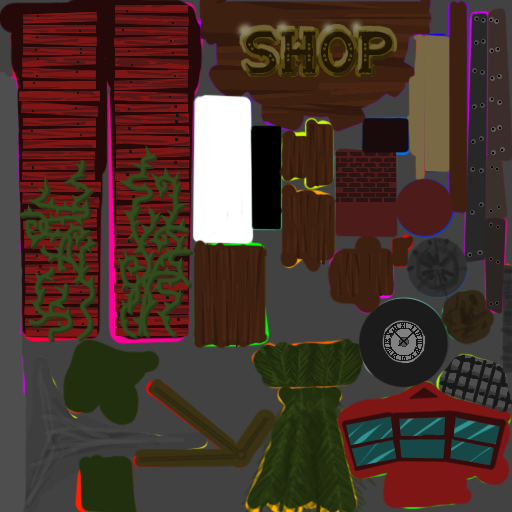
<style>
.page{position:relative;width:512px;height:512px}
.page>*{position:absolute;margin:0}
.t1{font:56.7px "Steampuff";letter-spacing:0.05em;color:#211703}
</style>
<div class="page">
<p class="t1" style="left:246px;top:31px;width:147px;height:42px">SHOP</p>
</div>
